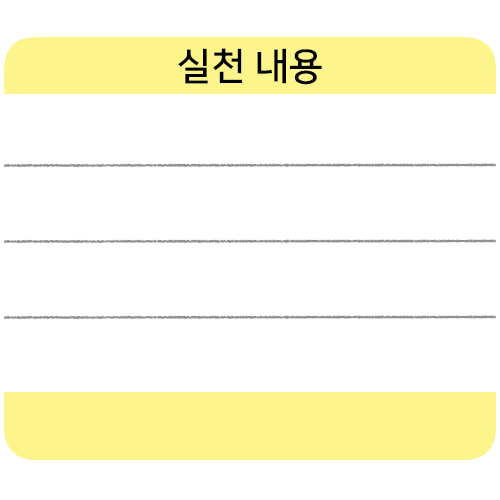
<style>
.page{position:relative;width:500px;height:500px;background:#ffffff}
.page>*{position:absolute;margin:0}
.t1{font:37.5px "NanumSquareB";color:#000000}
</style>
<div class="page">
<p class="t1" style="left:178px;top:48px;width:144px;height:37px">실천 내용</p>
</div>
